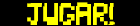
<style>
.page{position:relative;width:140px;height:26px;background:#000000}
.page>*{position:absolute;margin:0}
.t1{font:32px "PixelBug";color:#ffff00}
</style>
<div class="page">
<p class="t1" style="left:27px;top:2px;width:88px;height:23px">JUGAR!</p>
</div>
